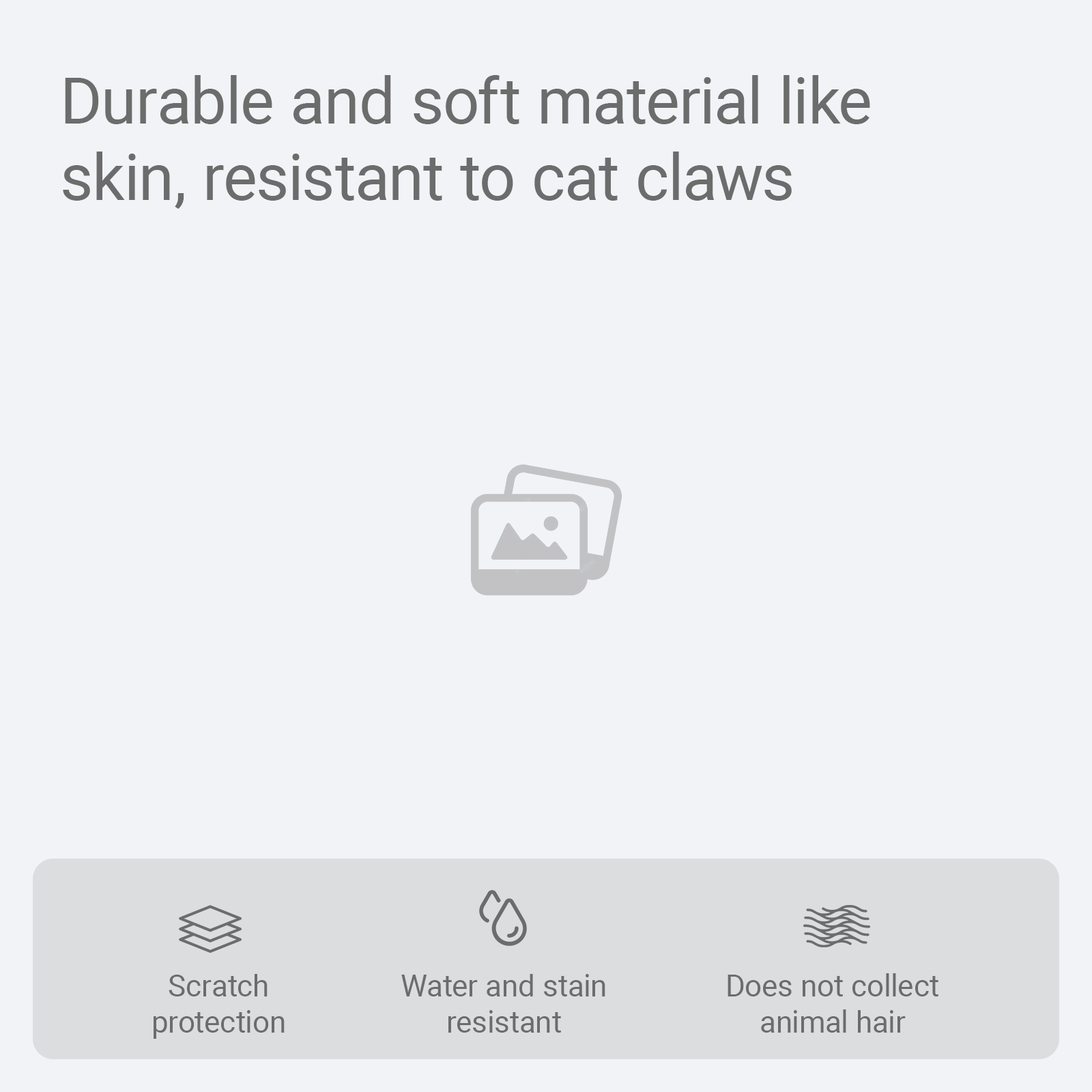
<style>
.page{position:relative;width:1092px;height:1092px;background:#f2f3f6}
.page>*{position:absolute;margin:0}
.t1{font:64.1px "Roboto-Regular";color:#6c6c6c}
.t2{font:30px "Roboto-Regular";color:#6c6c6c}
</style>
<div class="page">
<p class="t1" style="left:63px;top:75px;width:807px;height:134px">Durable and soft material like skin, resistant to cat claws</p>
<p class="t2" style="left:154px;top:974px;width:131px;height:65px;text-align:center">Scratch protection</p>
<p class="t2" style="left:401px;top:974px;width:204px;height:59px;text-align:center">Water and stain resistant</p>
<p class="t2" style="left:728px;top:973px;width:210px;height:60px;text-align:center">Does not collect animal hair</p>
</div>
